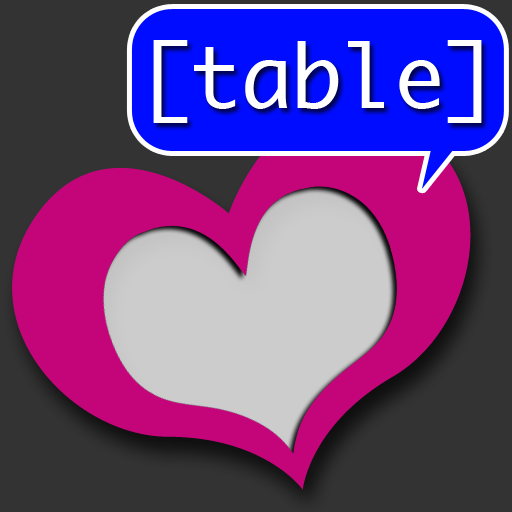
<style>
.page{position:relative;width:512px;height:512px;background:#333333}
.page>*{position:absolute;margin:0}
.t1{font:84.9px "Monaco";color:#ffffff}
</style>
<div class="page">
<p class="t1" style="left:153px;top:40px;width:329px;height:83px">[table]</p>
</div>
